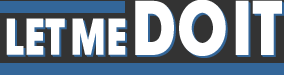
<style>
.page{position:relative;width:284px;height:75px;background:#ffffff}
.page>*{position:absolute;margin:0}
.t1{font:48px "ITCAvantGardePro-Bold";color:#fefefe;font-weight:bold;scale:0.8 1}
.t2{font:72px "ITCAvantGardePro-Bold";color:#fefefe;font-weight:bold;scale:0.8 1}
</style>
<div class="page">
<p class="t1" style="left:6px;top:0px;width:276px;height:56px">LET ME <span class="t2">DO IT</span></p>
</div>
